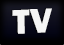
<style>
.page{position:relative;width:64px;height:45px}
.page>*{position:absolute;margin:0}
.t1{font:35.9px "FranklinGothic-Heavy";color:#ffffff}
</style>
<div class="page">
<p class="t1" style="left:12px;top:8px;width:40px;height:26px;rotate:-2deg;opacity:0.94">TV</p>
</div>
